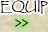
<style>
.page{position:relative;width:48px;height:32px}
.page>*{position:absolute;margin:0}
.t1{font:11.9px "Papyrus-Regular";letter-spacing:-0.02em;color:#000000;text-transform:uppercase}
</style>
<div class="page">
<p class="t1" style="left:0px;top:0px;width:48px;height:14px">EQUIP</p>
<p class="t1" style="left:15px;top:18px;width:14px;height:9px">&gt;&gt;</p>
</div>
